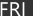
<style>
.page{position:relative;width:33px;height:16px;background:#333333}
.page>*{position:absolute;margin:0}
.t1{font:19.7px "SegoeUI";letter-spacing:0.02em;color:#ffffff}
</style>
<div class="page">
<p class="t1" style="left:0px;top:2px;width:25px;height:15px">FRI</p>
</div>
